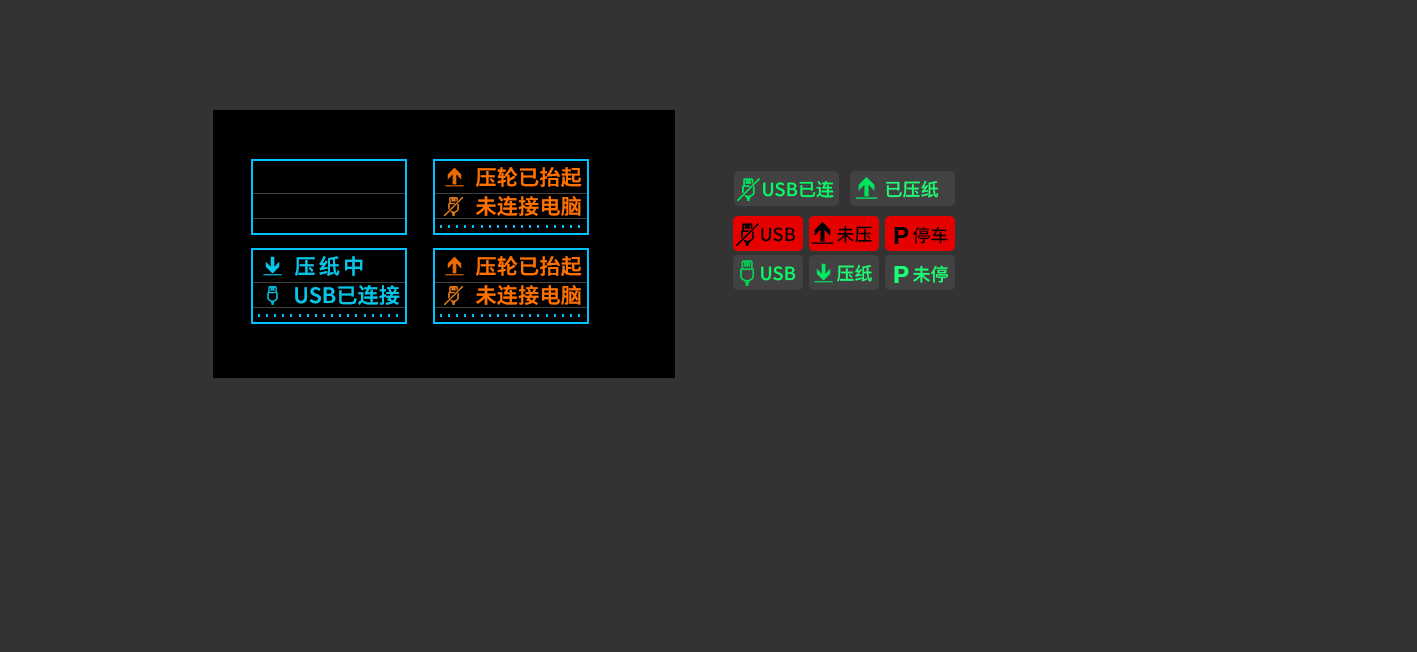
<style>
.page{position:relative;width:1417px;height:652px;background:#333333}
.page>*{position:absolute;margin:0}
.t1{font:21.1px "SourceHanSansCN-Medium";letter-spacing:0.01em;color:#ff7200}
.t2{font:18px "SourceHanSansCN-Medium";letter-spacing:0.01em;color:#00ff66}
.t3{font:18px "SourceHanSansCN-Medium";letter-spacing:0.01em;color:#19ff75}
.t4{font:18px "SourceHanSansCN-Medium";letter-spacing:0.01em;color:#000000}
.t5{font:24.4px "HelveticaNeueCE-Bold";letter-spacing:0.01em;color:#000000}
.t6{font:21.1px "SourceHanSansCN-Medium";letter-spacing:0.15em;color:#06c5e9}
.t7{font:24.4px "HelveticaNeueCE-Bold";letter-spacing:0.01em;color:#19ff75}
.t8{font:21.1px "SourceHanSansCN-Medium";letter-spacing:0.01em;color:#06c5e9}
</style>
<div class="page">
<p class="t1" style="left:476px;top:167px;width:106px;height:20px">压轮已抬起</p>
<p class="t2" style="left:763px;top:181px;width:71px;height:17px">USB已连</p>
<p class="t3" style="left:886px;top:180px;width:53px;height:18px">已压纸</p>
<p class="t1" style="left:476px;top:196px;width:105px;height:20px">未连接电脑</p>
<p class="t4" style="left:761px;top:227px;width:35px;height:15px">USB</p>
<p class="t4" style="left:837px;top:225px;width:35px;height:18px">未压</p>
<p class="t5" style="left:894px;top:227px;width:15px;height:17px">P</p>
<p class="t4" style="left:913px;top:226px;width:35px;height:18px">停车</p>
<p class="t6" style="left:295px;top:256px;width:68px;height:20px">压纸中</p>
<p class="t1" style="left:476px;top:256px;width:106px;height:20px">压轮已抬起</p>
<p class="t2" style="left:761px;top:266px;width:35px;height:15px">USB</p>
<p class="t3" style="left:837px;top:264px;width:35px;height:18px">压纸</p>
<p class="t7" style="left:894px;top:266px;width:15px;height:17px">P</p>
<p class="t3" style="left:913px;top:265px;width:35px;height:18px">未停</p>
<p class="t8" style="left:295px;top:285px;width:105px;height:20px">USB已连接</p>
<p class="t1" style="left:476px;top:285px;width:105px;height:20px">未连接电脑</p>
</div>
